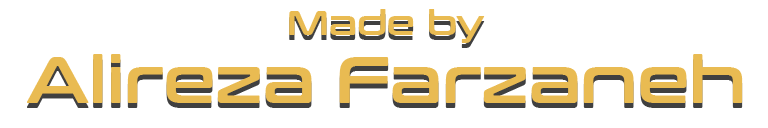
<style>
.page{position:relative;width:768px;height:128px;background:#ffffff}
.page>*{position:absolute;margin:0}
.t1{font:65px/100px "ConthraxSb-Regular";color:#e9bb52}
.t2{font:35px/100px "ConthraxSb-Regular";color:#e9bb52}
</style>
<div class="page">
<p class="t1" style="left:27px;top:9px;width:716px;height:94px;text-align:center"><span class="t2">Made by<br></span>Alireza Farzaneh</p>
</div>
